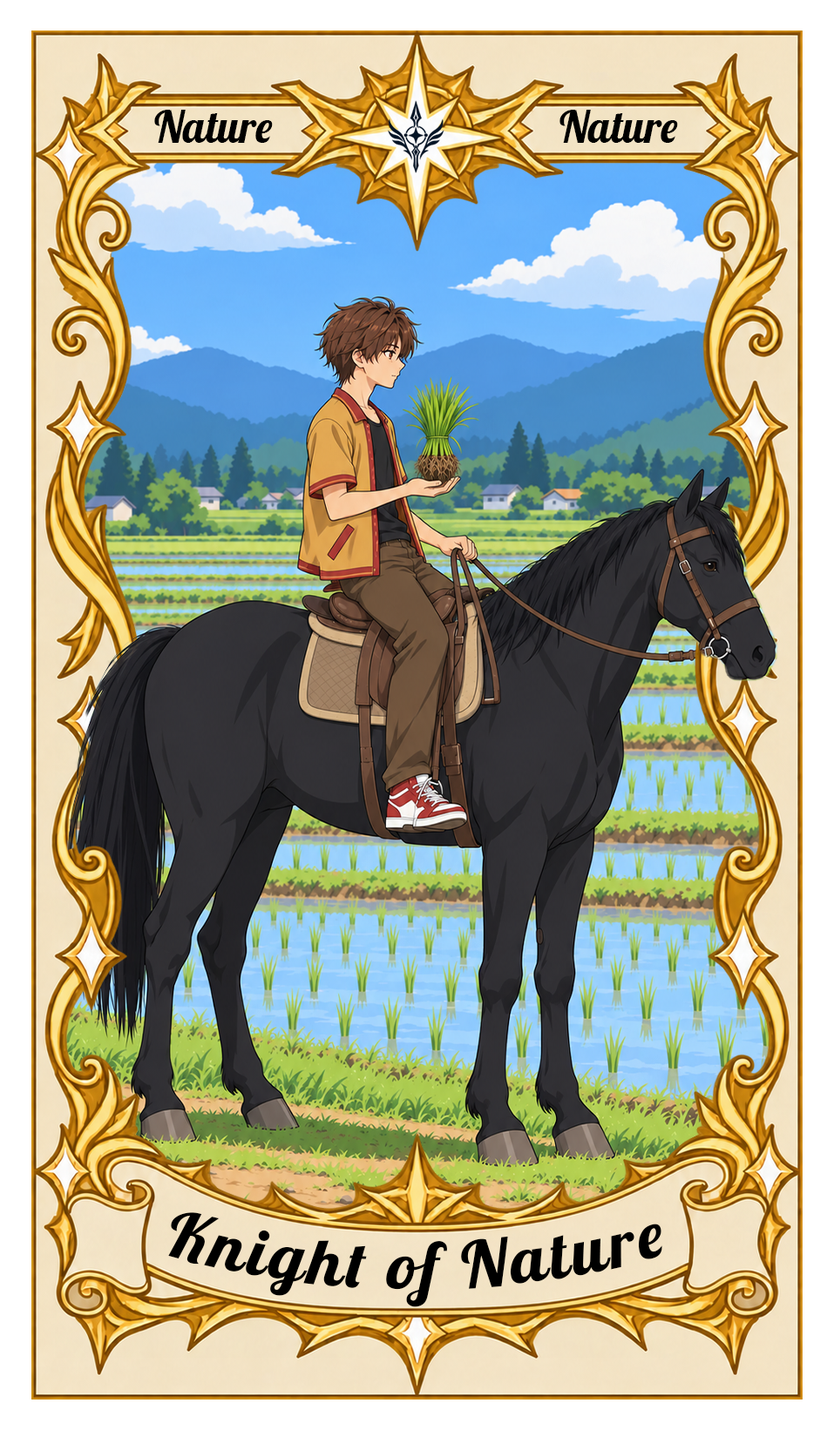
<style>
.page{position:relative;width:834px;height:1430px}
.page>*{position:absolute;margin:0}
.t1{font:43.6px "Lobster-Regular";color:#000000}
.t2{font:65.3px "Lobster-Regular";letter-spacing:0.05em;color:#000000}
</style>
<div class="page">
<p class="t1" style="left:154px;top:110px;width:119px;height:33px">Nature</p>
<p class="t1" style="left:559px;top:110px;width:119px;height:33px">Nature</p>
<p class="t2" style="left:168px;top:1213px;width:494px;height:95px">Knight of Nature</p>
</div>
